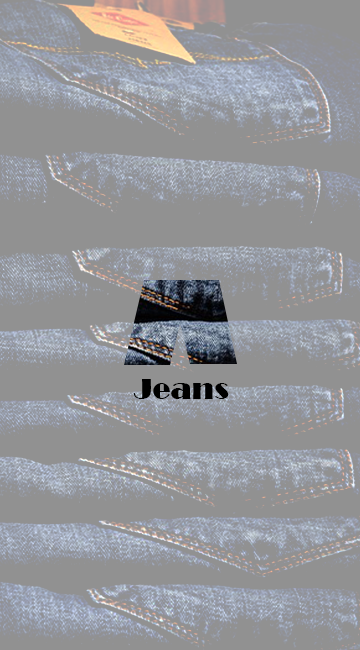
<style>
.page{position:relative;width:360px;height:650px;background:#919191}
.page>*{position:absolute;margin:0}
.t1{font:30px "Broadway";color:#000000}
</style>
<div class="page">
<p class="t1" style="left:133px;top:379px;width:96px;height:20px">Jeans</p>
</div>
